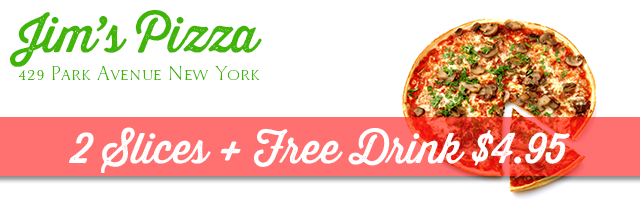
<style>
.page{position:relative;width:640px;height:200px;background:#ffffff}
.page>*{position:absolute;margin:0}
.t1{font:49.2px "ThirstyRoughReg";color:#40b507}
.t2{font:24.6px "WishesScriptCapsDisplay";color:#40b507}
.t3{font:41.8px "ThirstyRoughReg";color:#ffffff}
</style>
<div class="page">
<p class="t1" style="left:10px;top:9px;width:252px;height:58px">Jim’s Pizza</p>
<p class="t2" style="left:19px;top:66px;width:241px;height:14px">429 Park Avenue New York</p>
<p class="t3" style="left:69px;top:127px;width:501px;height:46px">2 Slices + Free Drink $4.95</p>
</div>
